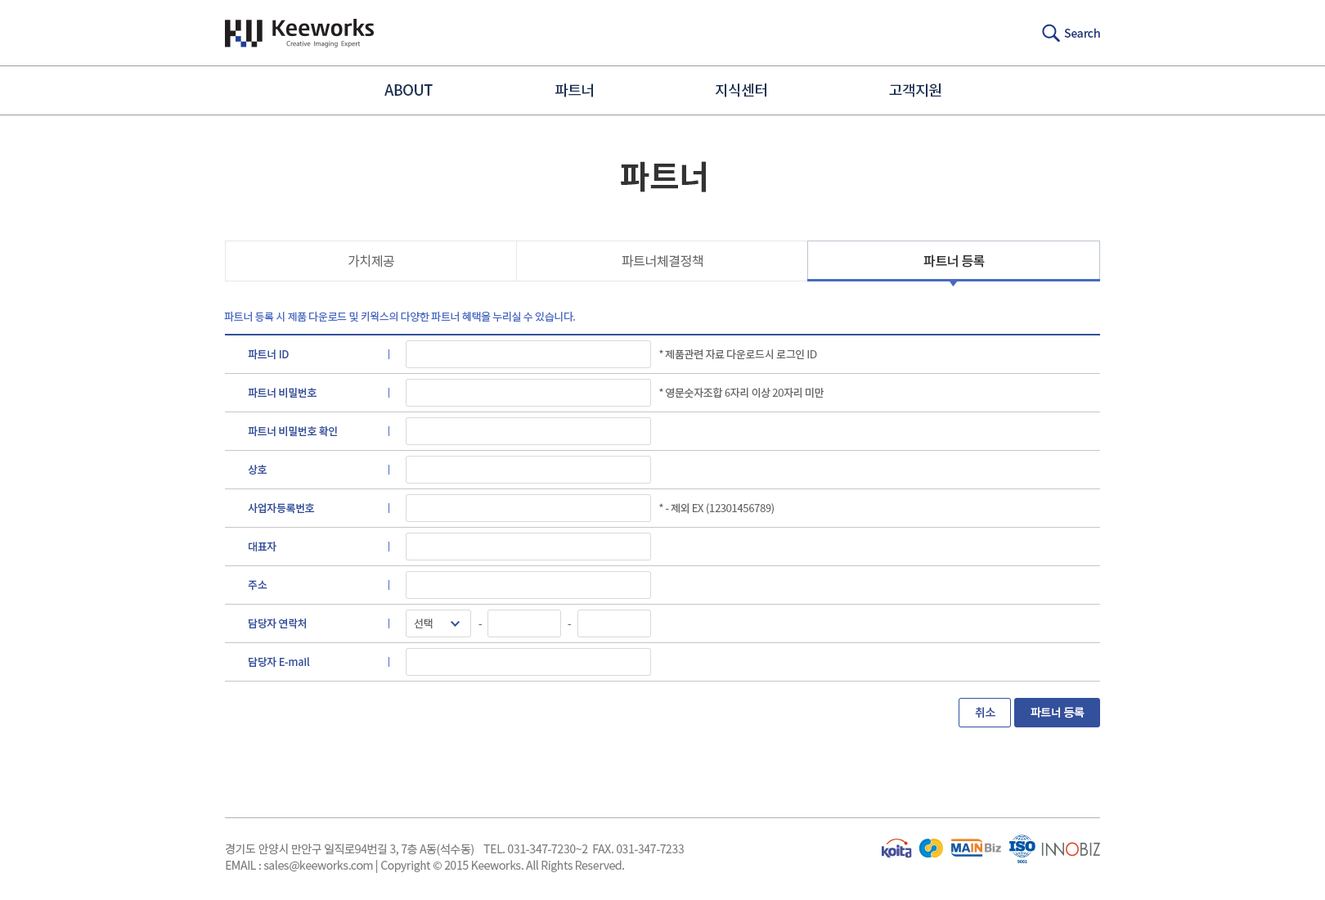
<style>
.page{position:relative;width:1325px;height:900px;background:#ffffff}
.page>*{position:absolute;margin:0}
.t1{font:11.5px "NotoSansCJKkr-Medium";letter-spacing:-0.025em;color:#1b3780}
.t2{font:14.7px "NotoSansCJKkr-Medium";letter-spacing:-0.025em;color:#1c3053;text-transform:uppercase}
.t3{font:32.7px "NotoSansCJKkr-Bold";letter-spacing:-0.025em;color:#333333}
.t4{font:13.1px "NotoSansCJKkr-DemiLight";letter-spacing:-0.025em;color:#666666}
.t5{font:13.1px "NotoSansCJKkr-Medium";letter-spacing:-0.025em;color:#333333}
.t6{font:10.6px "NotoSansCJKkr-Regular";letter-spacing:-0.025em;color:#486ac2}
.t7{font:10.6px/38.4px "NotoSansCJKkr-Medium";letter-spacing:-0.025em;color:#33509c}
.t8{font:10.6px/38.4px "NotoSansCJKkr-Regular";letter-spacing:-0.025em;color:#666666}
.t9{font:10.6px "NotoSansCJKkr-Regular";letter-spacing:-0.025em;color:#666666}
.t10{font:11.5px "NotoSansCJKkr-Medium";letter-spacing:-0.025em;color:#33509c}
.t11{font:11.5px "NotoSansCJKkr-Medium";letter-spacing:-0.025em;color:#ffffff}
.t12{font:11.5px/16.4px "NotoSansCJKkr-Regular";letter-spacing:-0.025em;color:#808080}
</style>
<div class="page">
<p class="t1" style="left:1064px;top:28px;width:36px;height:10px">Search</p>
<p class="t2" style="left:384px;top:84px;width:49px;height:12px">ABOUT</p>
<p class="t2" style="left:555px;top:83px;width:38px;height:14px">파트너</p>
<p class="t2" style="left:715px;top:83px;width:51px;height:14px">지식센터</p>
<p class="t2" style="left:889px;top:83px;width:53px;height:14px">고객지원</p>
<p class="t3" style="left:621px;top:161px;width:85px;height:31px">파트너</p>
<p class="t4" style="left:348px;top:254px;width:46px;height:13px">가치제공</p>
<p class="t4" style="left:622px;top:254px;width:81px;height:13px">파트너체결정책</p>
<p class="t5" style="left:924px;top:254px;width:61px;height:13px">파트너 등록</p>
<p class="t6" style="left:224px;top:311px;width:351px;height:11px">파트너 등록 시 제품 다운로드 및 키웍스의 다양한 파트너 혜택을 누리실 수 있습니다.</p>
<p class="t7" style="left:248px;top:348px;width:89px;height:319px">파트너 ID<br>파트너 비밀번호<br>파트너 비밀번호 확인<br>상호<br>사업자등록번호<br>대표자<br>주소<br>담당자 연락처<br>담당자 E-mail</p>
<p class="t8" style="left:659px;top:348px;width:166px;height:167px">* 제품관련 자료 다운로드시 로그인 ID<br>* 영문숫자조합 6자리 이상 20자리 미만<br><br><br>* - 제외 EX (12301456789)</p>
<p class="t9" style="left:414px;top:618px;width:19px;height:11px">선택</p>
<p class="t9" style="left:479px;top:623px;width:3px;height:2px">-</p>
<p class="t9" style="left:568px;top:623px;width:3px;height:2px">-</p>
<p class="t10" style="left:975px;top:707px;width:21px;height:11px">취소</p>
<p class="t11" style="left:1031px;top:707px;width:54px;height:11px">파트너 등록</p>
<p class="t12" style="left:226px;top:843px;width:458px;height:30px">경기도 안양시 만안구 일직로94번길 3, 7층 A동(석수동)    TEL. 031-347-7230~2  FAX. 031-347-7233<br>EMAIL : sales@keeworks.com | Copyright © 2015 Keeworks. All Rights Reserved.</p>
</div>
